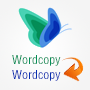
<style>
.page{position:relative;width:90px;height:90px}
.page>*{position:absolute;margin:0}
.t1{font:12px "FZYTK--GBK1-0";color:#058e58}
.t2{font:12px "FZYTK--GBK1-0";color:#062eb1}
</style>
<div class="page">
<p class="t1" style="left:12px;top:55px;width:49px;height:11px">Wordcopy</p>
<p class="t2" style="left:12px;top:70px;width:49px;height:11px">Wordcopy</p>
</div>
